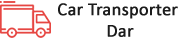
<style>
.page{position:relative;width:188px;height:41px;background:#ffffff}
.page>*{position:absolute;margin:0}
.t1{font:18px "Calibri";color:#1c1c1c;font-weight:bold}
</style>
<div class="page">
<p class="t1" style="left:58px;top:3px;width:120px;height:34px;text-align:center">Car Transporter <br>Dar</p>
</div>
